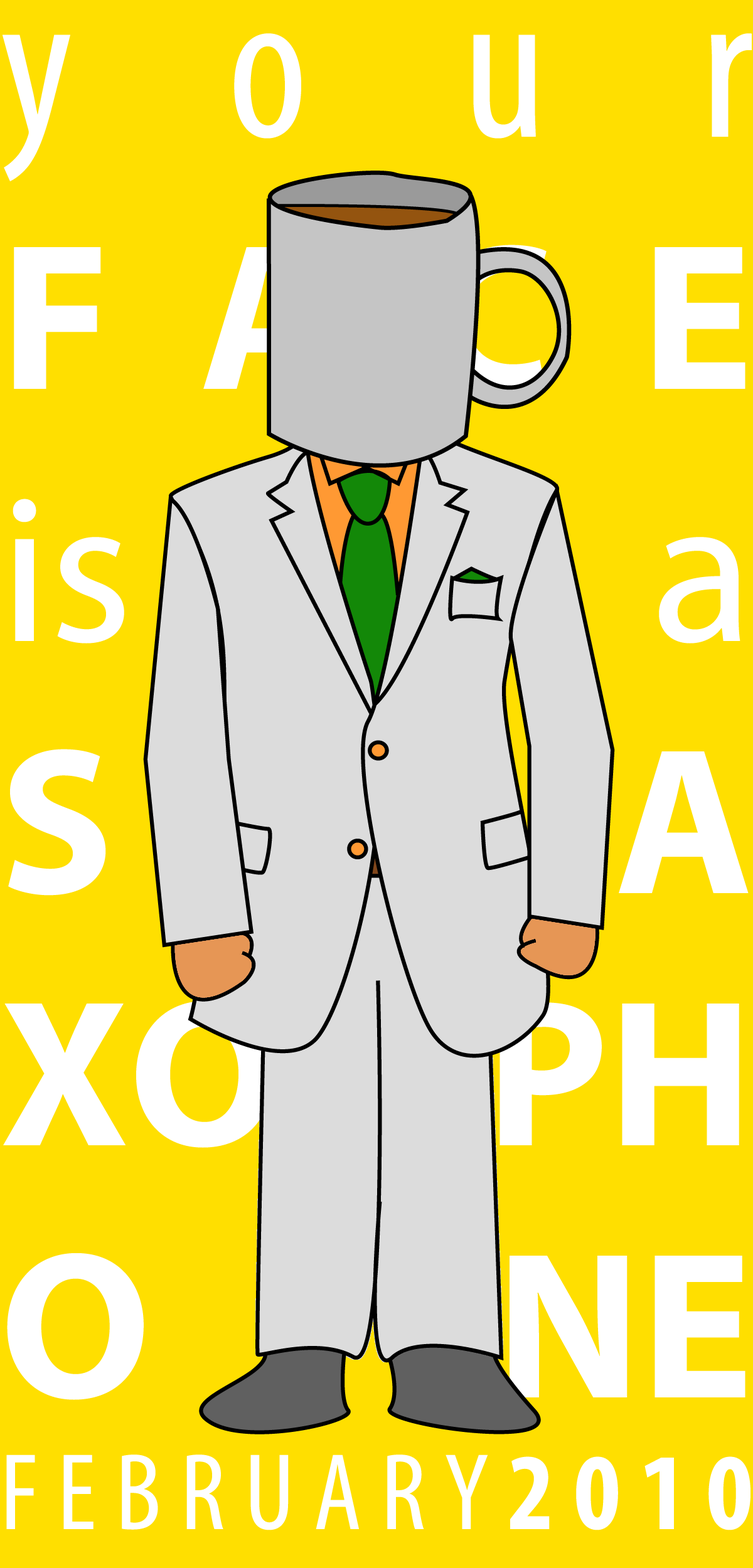
<style>
.page{position:relative;width:753px;height:1568px;background:#ffdf00}
.page>*{position:absolute;margin:0}
.t1{font:210.1px "MyriadPro-Bold";color:#ffffff}
.t2{font:210.1px "MyriadPro-Cond";color:#ffffff}
.t3{font:210.1px "MyriadPro-Regular";color:#ffffff}
.t4{font:109.8px "MyriadPro-Cond";color:#ffffff}
.t5{font:109.8px "MyriadPro-BoldCond";color:#ffffff}
</style>
<div class="page">
<p class="t1" style="left:3px;top:33px;width:748px;height:1497px;text-align:justify"><span class="t2">your </span>FACE<br><span class="t3">is a <br></span>S      A<br>XO PH O NE <br><span class="t4">FEBRUARY</span><span class="t5">2010</span></p>
</div>
